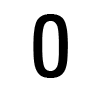
<style>
.page{position:relative;width:100px;height:100px;background:#ffffff}
.page>*{position:absolute;margin:0}
.t1{font:100px "TwCenMT-Condensed";color:#000000}
</style>
<div class="page">
<p class="t1" style="left:33px;top:14px;width:35px;height:64px">O</p>
</div>
